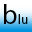
<style>
.page{position:relative;width:32px;height:32px}
.page>*{position:absolute;margin:0}
.t1{font:27.6px "MyriadPro-Regular";letter-spacing:0.02em;color:#000000}
.t2{font:13.8px "MyriadPro-Regular";letter-spacing:0.02em;color:#000000;scale:0.92 1}
</style>
<div class="page">
<p class="t1" style="left:4px;top:4px;width:13px;height:20px">b</p>
<p class="t2" style="left:18px;top:14px;width:10px;height:10px">lu</p>
</div>
